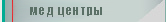
<style>
.page{position:relative;width:166px;height:22px;background:#c8d4d0}
.page>*{position:absolute;margin:0}
.t1{font:12px "Impact";letter-spacing:0.1em;color:#5b7066}
</style>
<div class="page">
<p class="t1" style="left:30px;top:7px;width:72px;height:10px">мед центры</p>
</div>
